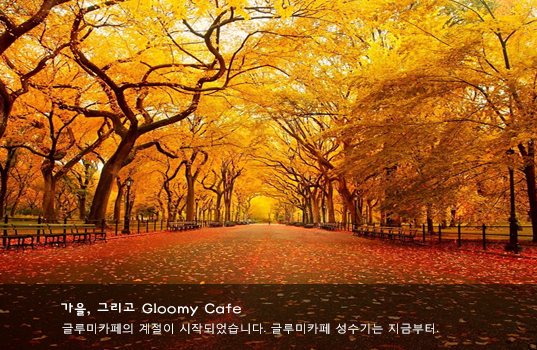
<style>
.page{position:relative;width:537px;height:350px}
.page>*{position:absolute;margin:0}
.t1{font:14px "HaanBaekjeM";color:#ffffff;scale:1.1 1}
.t2{font:11px "MalgunGothicRegular";color:#ffffff;scale:1.1 1}
</style>
<div class="page">
<p class="t1" style="left:61px;top:303px;width:180px;height:13px">가을, 그리고 Gloomy Cafe</p>
<p class="t2" style="left:62px;top:323px;width:377px;height:11px">글루미카페의 계절이 시작되었습니다. 글루미카페 성수기는 지금부터.</p>
</div>
